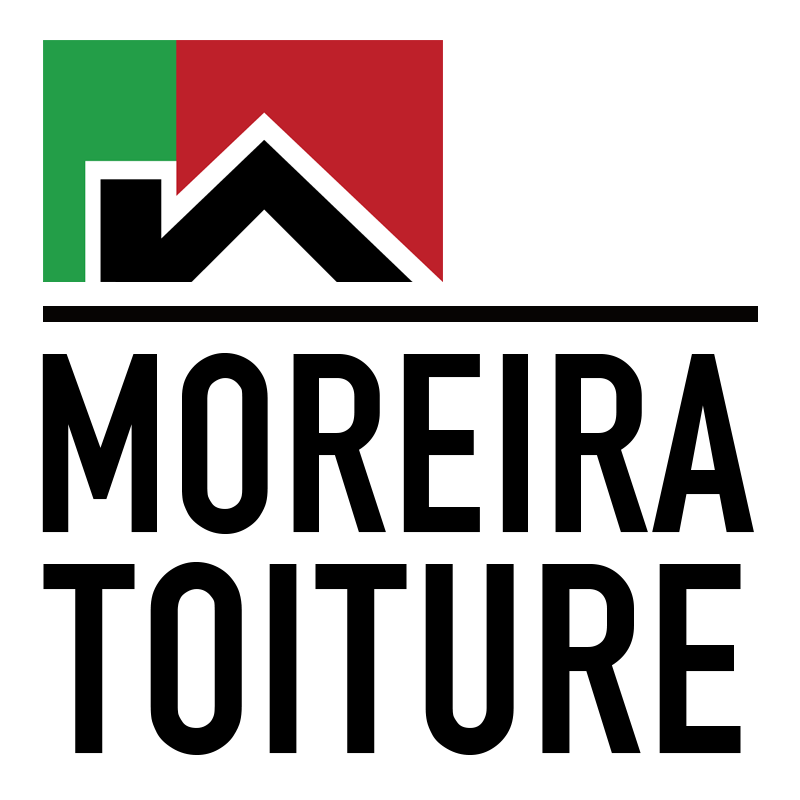
<style>
.page{position:relative;width:800px;height:800px;background:#ffffff}
.page>*{position:absolute;margin:0}
.t1{font:266.7px "FetteEngschrift";color:#000000}
.t2{font:283.3px "FetteEngschrift";color:#000000}
</style>
<div class="page">
<p class="t1" style="left:42px;top:353px;width:712px;height:181px">MOREIRA</p>
<p class="t2" style="left:43px;top:562px;width:698px;height:193px">TOITURE</p>
</div>
